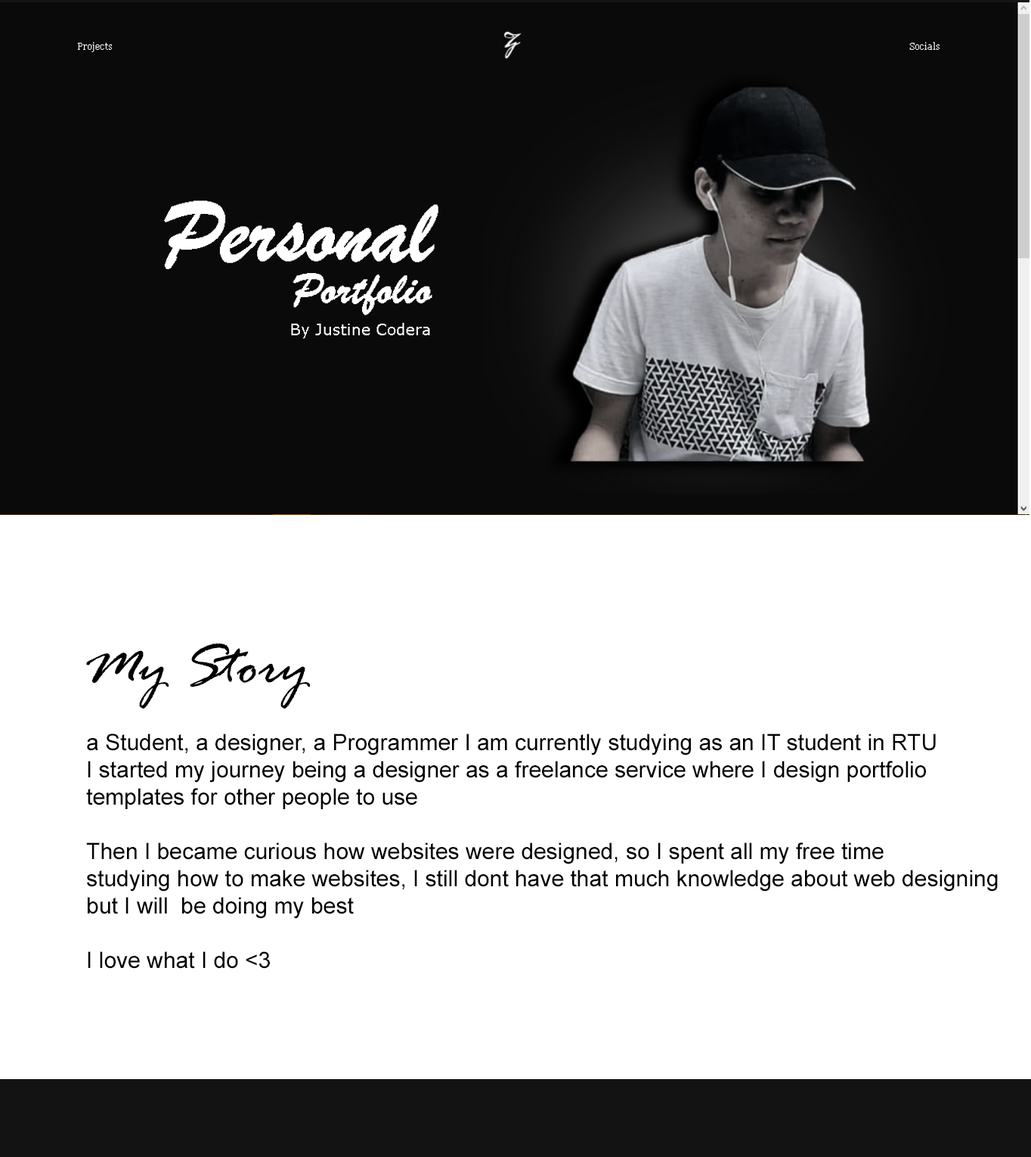
<style>
.page{position:relative;width:1031px;height:1157px;background:#ffffff}
.page>*{position:absolute;margin:0}
.t1{font:60.5px "RageItalic";color:#000000}
.t2{font:22.7px "ArialMT";color:#000000}
</style>
<div class="page">
<p class="t1" style="left:86px;top:643px;width:224px;height:65px">My Story</p>
<p class="t2" style="left:86px;top:733px;width:912px;height:235px">a Student, a designer, a Programmer I am currently studying as an IT student in RTU<br>I started my journey being a designer as a freelance service where I design portfolio<br>templates for other people to use<br><br>Then I became curious how websites were designed, so I spent all my free time<br>studying how to make websites, I still dont have that much knowledge about web designing<br>but I will  be doing my best<br><br>I love what I do &lt;3</p>
</div>
